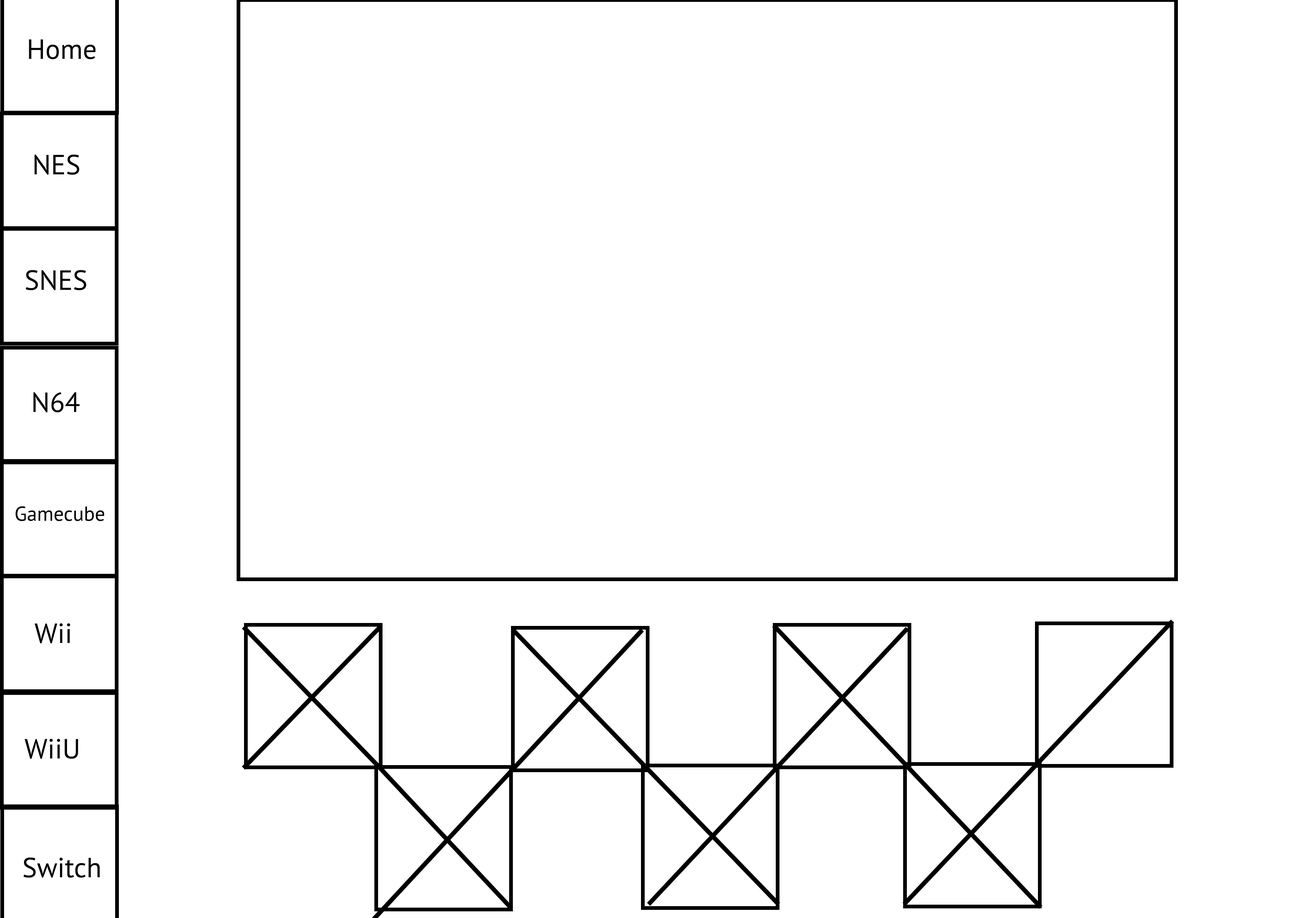
<style>
.page{position:relative;width:1299px;height:918px;background:#ffffff}
.page>*{position:absolute;margin:0}
.t1{font:27.8px "MyriadPro-Regular";color:#000000}
.t2{font:20.4px "MyriadPro-Regular";color:#000000}
</style>
<div class="page">
<p class="t1" style="left:29px;top:39px;width:67px;height:20px">Home</p>
<p class="t1" style="left:34px;top:154px;width:45px;height:21px">NES</p>
<p class="t1" style="left:26px;top:270px;width:60px;height:20px">SNES</p>
<p class="t1" style="left:33px;top:392px;width:47px;height:20px">N64</p>
<p class="t2" style="left:16px;top:506px;width:88px;height:15px">Gamecube</p>
<p class="t1" style="left:34px;top:623px;width:36px;height:20px">Wii</p>
<p class="t1" style="left:24px;top:739px;width:54px;height:20px">WiiU</p>
<p class="t1" style="left:23px;top:857px;width:77px;height:21px">Switch</p>
</div>
